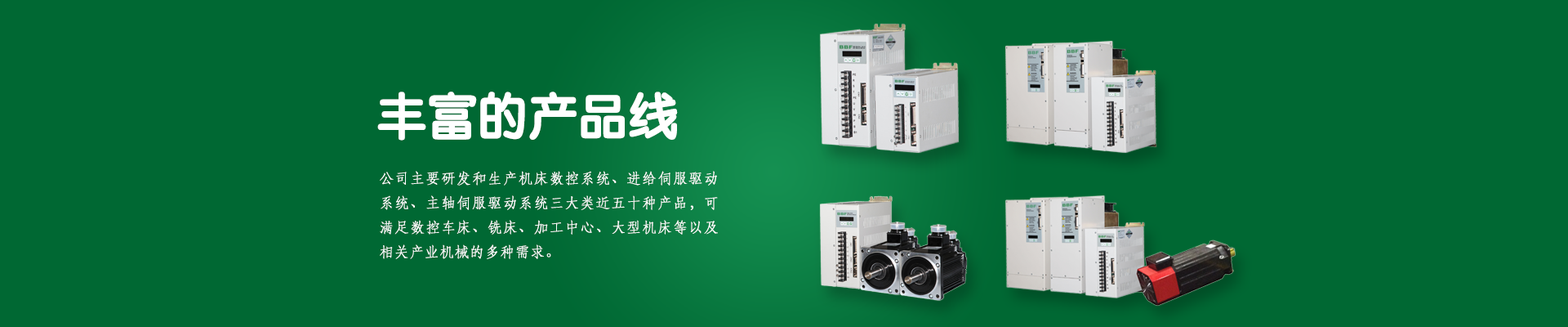
<style>
.page{position:relative;width:1568px;height:327px;background:#006833}
.page>*{position:absolute;margin:0}
.t1{font:49px "STYuanti-SC-Bold";color:#ffffff;text-transform:uppercase;font-weight:bold}
.t2{font:14.7px/24.5px "STFangsong";color:#ffffff;text-transform:uppercase;font-weight:bold}
</style>
<div class="page">
<p class="t1" style="left:377px;top:91px;width:301px;height:49px">丰富的产品线</p>
<p class="t2" style="left:380px;top:171px;width:338px;height:88px;text-align:justify">公司主要研发和生产机床数控系统、进给伺服驱动系统、主轴伺服驱动系统三大类近五十种产品，可满足数控车床、铣床、加工中心、大型机床等以及相关产业机械的多种需求。</p>
</div>
